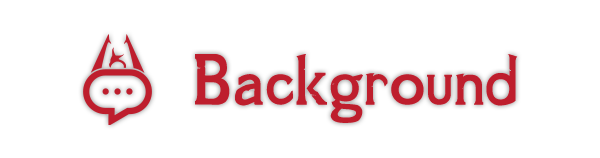
<style>
.page{position:relative;width:600px;height:158px;background:#ffffff}
.page>*{position:absolute;margin:0}
.t1{font:91.8px "SovngardeLight";color:#be1e2d}
</style>
<div class="page">
<p class="t1" style="left:195px;top:54px;width:323px;height:69px">Background</p>
</div>
